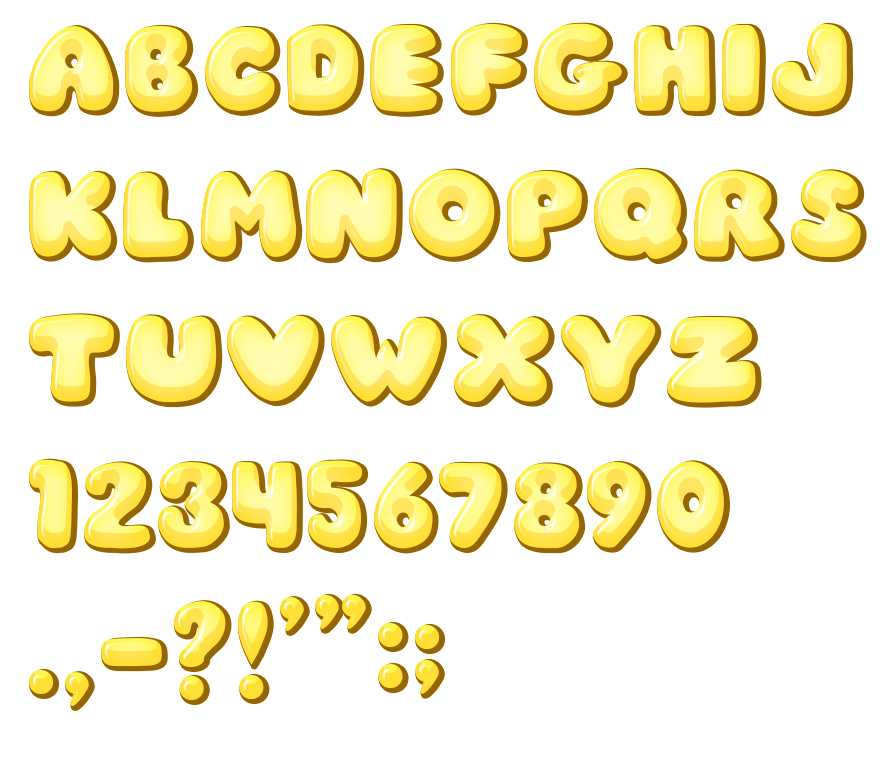
<style>
.page{position:relative;width:895px;height:763px;background:#ffffff}
.page>*{position:absolute;margin:0}
.t1{font:121.5px "JIChubbyCaps"}
</style>
<div class="page">
<p class="t1" style="left:29px;top:23px;width:832px;height:683px">ABCDEFGHIJ<br>KLMnoPQRS<br>TUvwXYZ<br>1234567890<br>.,-?!'”:;</p>
</div>
